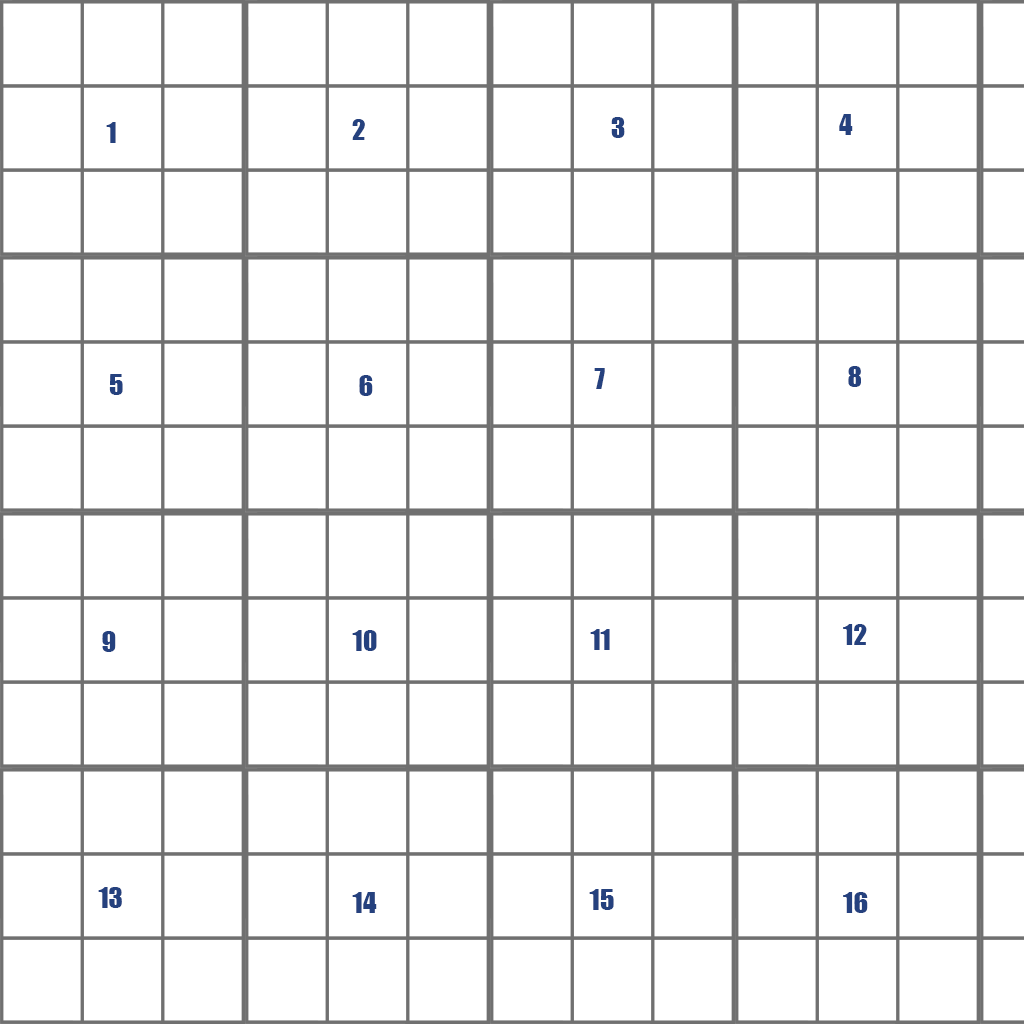
<style>
.page{position:relative;width:1024px;height:1024px;background:#ffffff}
.page>*{position:absolute;margin:0}
.t1{font:26.8px "Impact";color:#25417e}
</style>
<div class="page">
<p class="t1" style="left:106px;top:122px;width:10px;height:21px">1</p>
<p class="t1" style="left:352px;top:119px;width:13px;height:21px">2</p>
<p class="t1" style="left:611px;top:117px;width:14px;height:21px">3</p>
<p class="t1" style="left:839px;top:114px;width:14px;height:21px">4</p>
<p class="t1" style="left:848px;top:366px;width:13px;height:21px">8</p>
<p class="t1" style="left:109px;top:374px;width:14px;height:21px">5</p>
<p class="t1" style="left:359px;top:375px;width:14px;height:21px">6</p>
<p class="t1" style="left:594px;top:368px;width:11px;height:21px">7</p>
<p class="t1" style="left:352px;top:630px;width:25px;height:21px">10</p>
<p class="t1" style="left:590px;top:629px;width:20px;height:21px">11</p>
<p class="t1" style="left:843px;top:624px;width:24px;height:21px">12</p>
<p class="t1" style="left:102px;top:631px;width:14px;height:21px">9</p>
<p class="t1" style="left:98px;top:887px;width:24px;height:21px">13</p>
<p class="t1" style="left:352px;top:892px;width:25px;height:21px">14</p>
<p class="t1" style="left:589px;top:889px;width:25px;height:21px">15</p>
<p class="t1" style="left:843px;top:892px;width:25px;height:21px">16</p>
</div>
